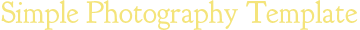
<style>
.page{position:relative;width:360px;height:30px;background:#ffffff}
.page>*{position:absolute;margin:0}
.t1{font:30px "GoudyBookletter1911";color:#f4e47a}
</style>
<div class="page">
<p class="t1" style="left:1px;top:0px;width:357px;height:30px">Simple Photography Template</p>
</div>
